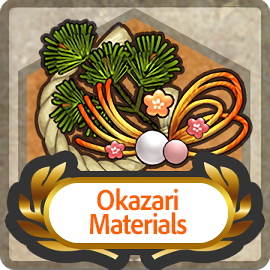
<style>
.page{position:relative;width:270px;height:270px}
.page>*{position:absolute;margin:0}
.t1{font:30px/24px "AdobeClean-Bold";letter-spacing:-0.04em;color:#ff5d00;scale:0.9 1}
</style>
<div class="page">
<p class="t1" style="left:89px;top:188px;width:98px;height:47px;text-align:center">Okazari<br>Materials</p>
</div>
